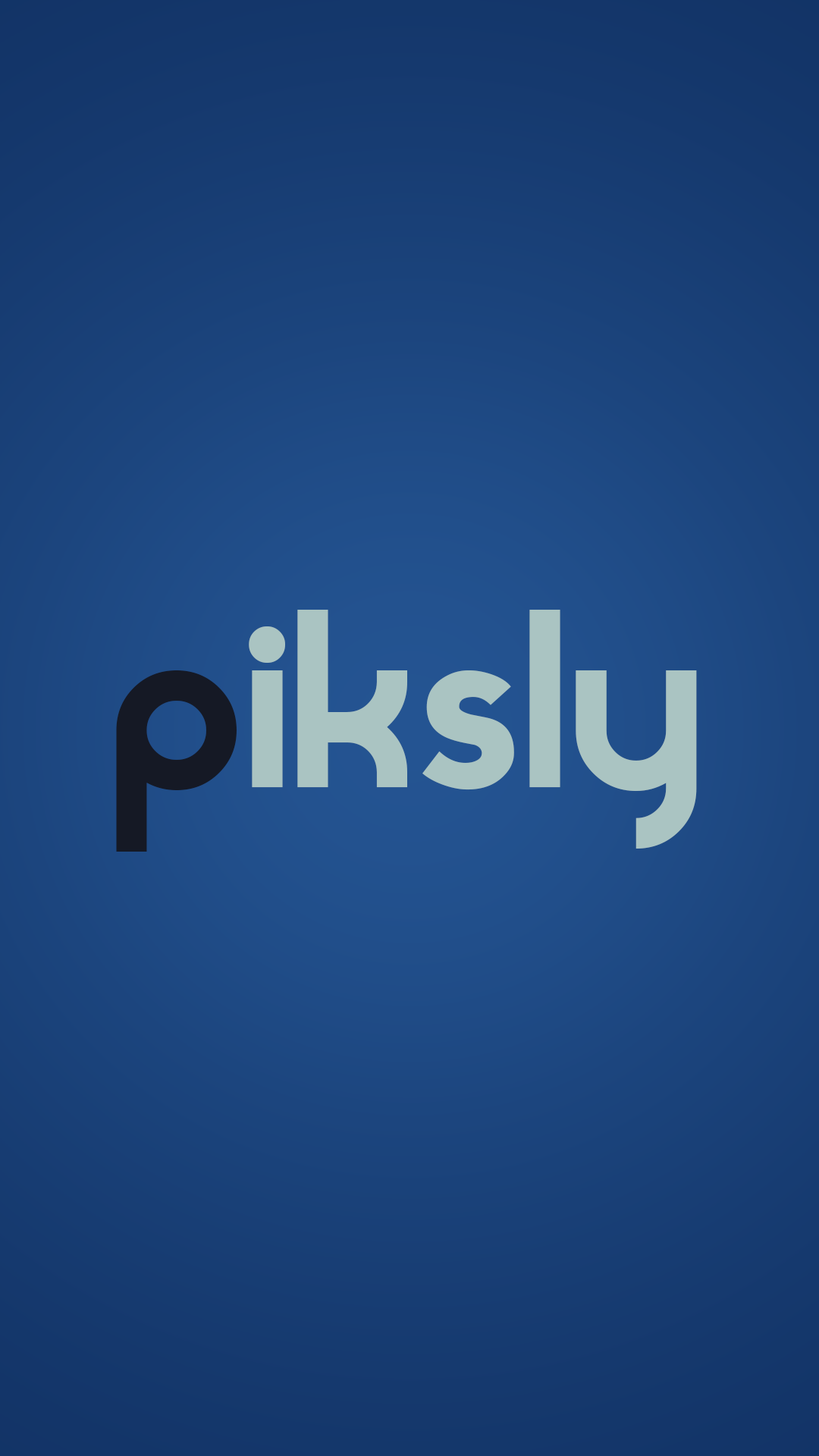
<style>
.page{position:relative;width:819px;height:1456px}
.page>*{position:absolute;margin:0}
.t1{font:224.7px "Moderna";color:#aac4c2}
.t2{font:224.7px "Moderna";color:#151925}
</style>
<div class="page">
<p class="t1" style="left:116px;top:610px;width:581px;height:242px"><span class="t2">p</span>iksly</p>
</div>
